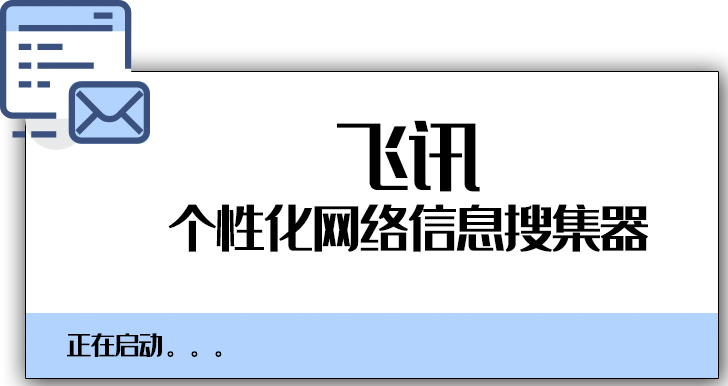
<style>
.page{position:relative;width:728px;height:386px;background:#ffffff}
.page>*{position:absolute;margin:0}
.t1{font:48px/84px "35--Regular";color:#000000}
.t2{font:72px/84px "35--Regular";color:#000000}
.t3{font:24px "35--Regular";color:#000000}
</style>
<div class="page">
<p class="t1" style="left:168px;top:120px;width:480px;height:132px;text-align:center"><span class="t2">飞讯<br></span>个性化网络信息搜集器</p>
<p class="t3" style="left:67px;top:333px;width:155px;height:24px">正在启动。。。</p>
</div>
